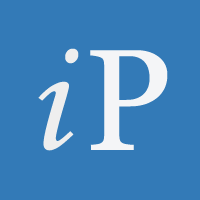
<style>
.page{position:relative;width:200px;height:200px;background:#337ab7}
.page>*{position:absolute;margin:0}
.t1{font:160px "MonotypeCorsiva";color:#eeeeee}
.t2{font:144px "Georgia";color:#f4f5f7}
</style>
<div class="page">
<p class="t1" style="left:38px;top:48px;width:41px;height:103px">i</p>
<p class="t2" style="left:90px;top:50px;width:78px;height:100px">P</p>
</div>
